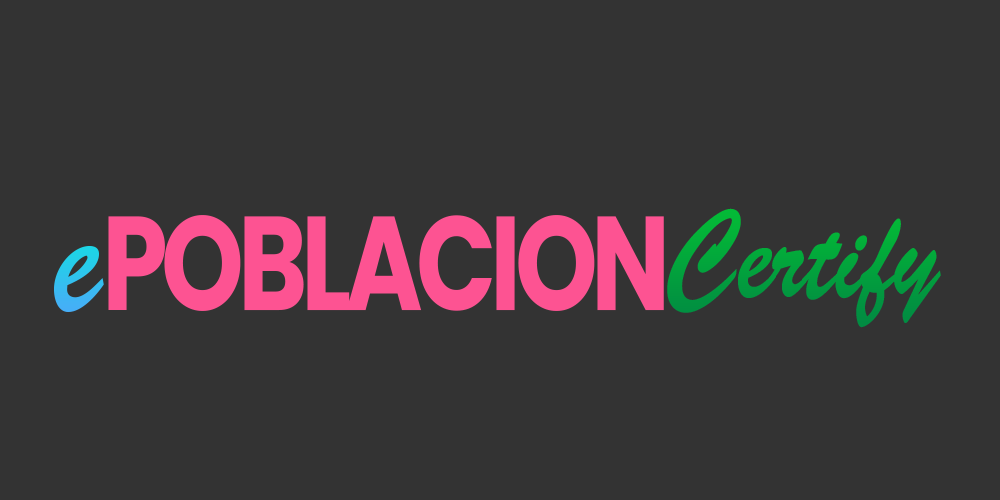
<style>
.page{position:relative;width:1000px;height:500px;background:#333333}
.page>*{position:absolute;margin:0}
.t1{font:125px "BrushScriptStd";color:#02a13d;scale:0.79 1}
.t2{font:133.3px "Poppins-Bold";letter-spacing:-0.06em;color:#fd5392;scale:0.79 1}
.t3{font:166.7px "BrushScriptStd";color:#32c1ee;scale:0.79 1}
</style>
<div class="page">
<p class="t1" style="left:667px;top:208px;width:274px;height:120px">Certify</p>
<p class="t2" style="left:108px;top:215px;width:556px;height:96px">POBLACION</p>
<p class="t3" style="left:54px;top:246px;width:50px;height:67px">e</p>
</div>
